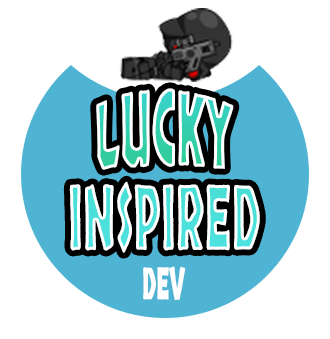
<style>
.page{position:relative;width:330px;height:339px;background:#ffffff}
.page>*{position:absolute;margin:0}
.t1{font:89.1px "Skranji-Bold";letter-spacing:0.01em;scale:0.46 1}
.t2{font:44px "Skranji-Bold";letter-spacing:0.01em;color:#ffffff;scale:0.46 1}
</style>
<div class="page">
<p class="t1" style="left:96px;top:88px;width:138px;height:82px">LUCKY</p>
<p class="t1" style="left:69px;top:181px;width:191px;height:72px">INSPIRED</p>
<p class="t2" style="left:143px;top:266px;width:43px;height:35px">DEV</p>
</div>
